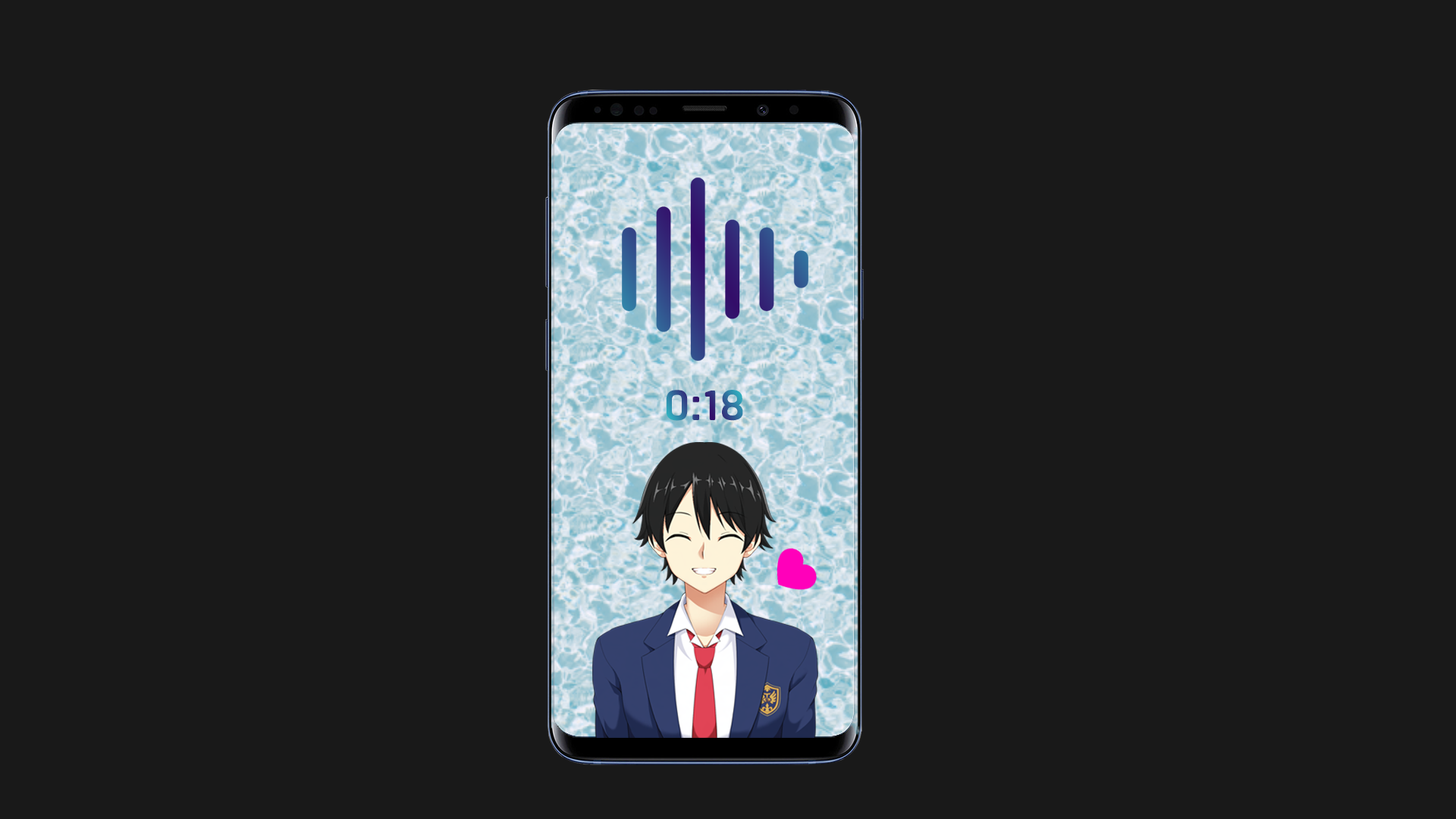
<style>
.page{position:relative;width:1456px;height:819px;background:#191919}
.page>*{position:absolute;margin:0}
.t1{font:54.6px "RSU-Bold"}
</style>
<div class="page">
<p class="t1" style="left:666px;top:390px;width:77px;height:31px">0:18</p>
</div>
